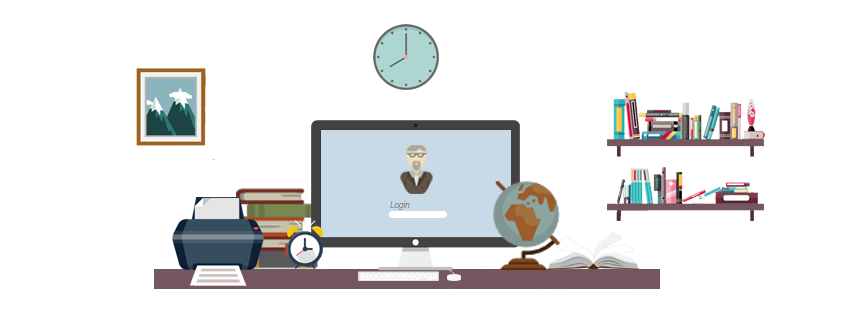
<style>
.page{position:relative;width:850px;height:320px;background:#ffffff}
.page>*{position:absolute;margin:0}
.t1{font:8px "Raleway-LightItalic";color:#757b7c}
</style>
<div class="page">
<p class="t1" style="left:390px;top:201px;width:20px;height:9px">Login</p>
</div>
